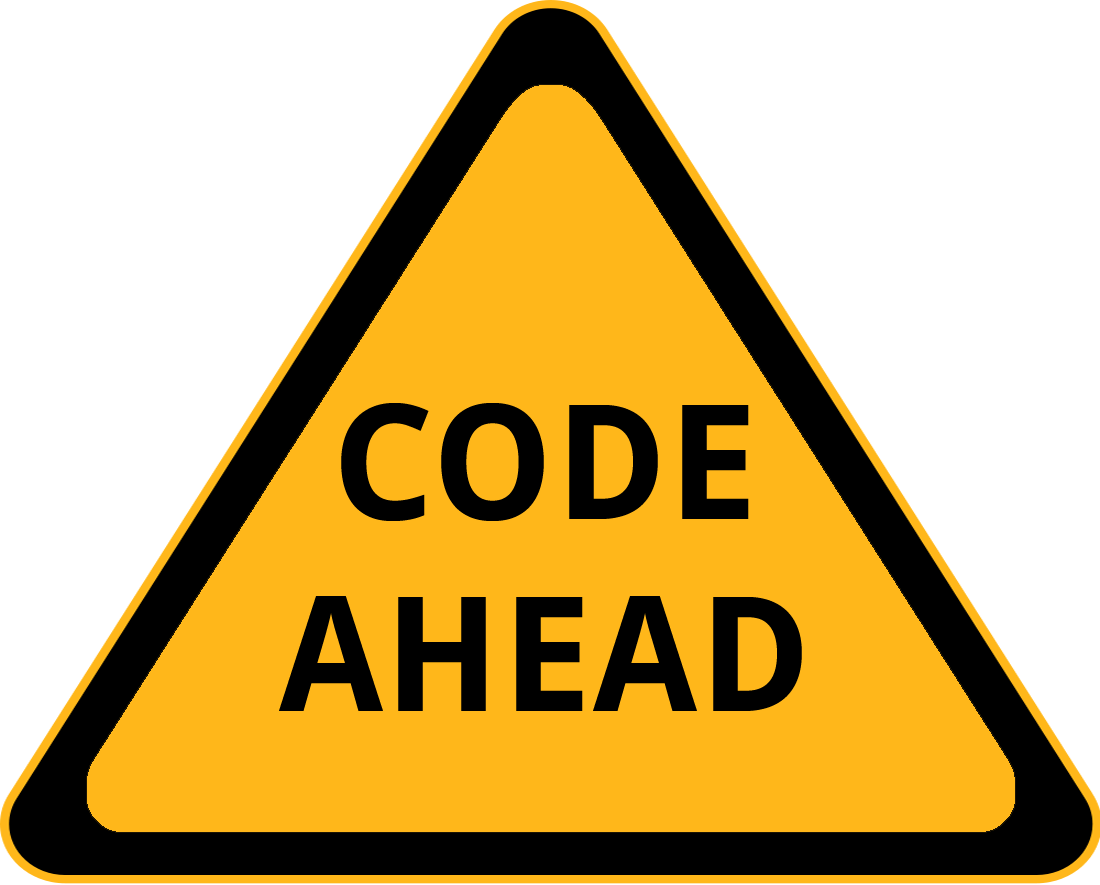
<style>
.page{position:relative;width:1100px;height:885px;background:#ffffff}
.page>*{position:absolute;margin:0}
.t1{font:160px "DroidSans-Bold";letter-spacing:0.01em;color:#000000}
</style>
<div class="page">
<p class="t1" style="left:279px;top:403px;width:523px;height:308px;text-align:center">CODE<br>AHEAD</p>
</div>
